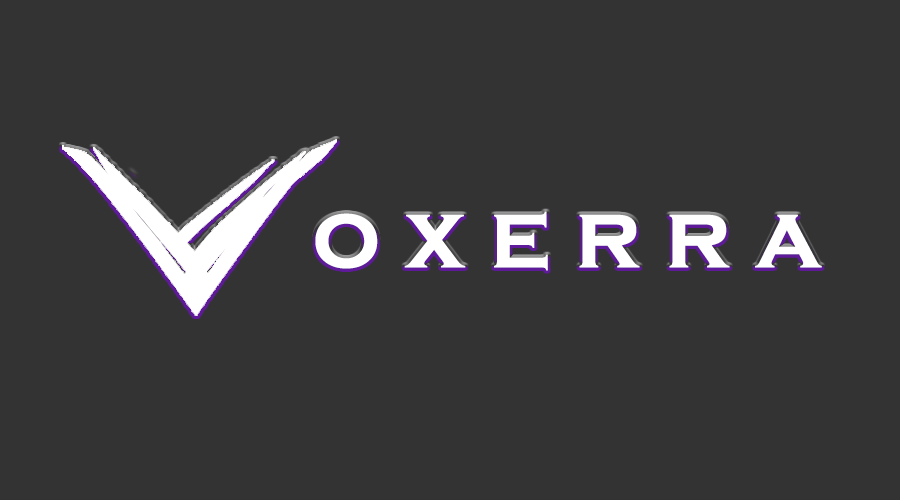
<style>
.page{position:relative;width:900px;height:500px;background:#333333}
.page>*{position:absolute;margin:0}
.t1{font:96px "CopperplateGothic-Bold";letter-spacing:0.25em;color:#ffffff}
</style>
<div class="page">
<p class="t1" style="left:315px;top:211px;width:507px;height:60px">oxerra</p>
</div>
